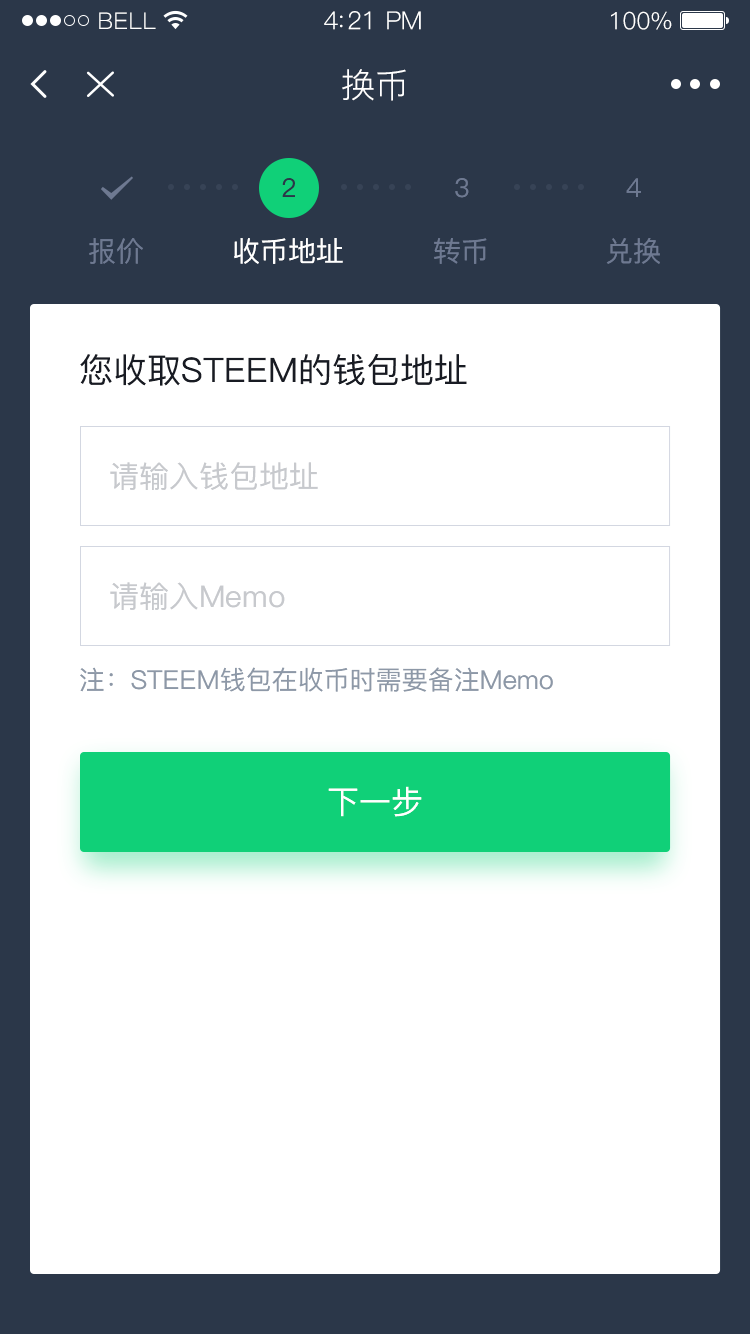
<style>
.page{position:relative;width:750px;height:1334px;background:#ffffff}
.page>*{position:absolute;margin:0}
.t1{font:23px "PingFang-SC-Regular";letter-spacing:0.02em;color:#ffffff}
.t2{font:25px "PingFang-SC-Regular";letter-spacing:-0.02em;color:#ffffff}
.t3{font:24px "PingFang-SC-Regular";letter-spacing:-0.02em;color:#ffffff}
.t4{font:34px "PingFang-SC-Regular";color:#ffffff}
.t5{font:26px "PingFang-SC-Medium";color:#2b3749}
.t6{font:26px "PingFang-SC-Medium";color:#6e7991}
.t7{font:28px "PingFang-SC-Medium";color:#6e7991}
.t8{font:28px "PingFang-SC-Medium";color:#ffffff}
.t9{font:34px "PingFang-SC-Medium";color:#181b23}
.t10{font:30px "PingFang-SC-Medium";color:#c7c9cd}
.t11{font:26px "PingFang-SC-Medium";color:#8d98a7}
.t12{font:32px "PingFang-SC-Medium";color:#ffffff}
</style>
<div class="page">
<p class="t1" style="left:99px;top:12px;width:57px;height:17px">BELL</p>
<p class="t2" style="left:324px;top:11px;width:97px;height:19px">4:21 PM</p>
<p class="t3" style="left:611px;top:11px;width:61px;height:19px">100%</p>
<p class="t4" style="left:342px;top:69px;width:64px;height:32px">换币</p>
<p class="t5" style="left:282px;top:178px;width:13px;height:19px">2</p>
<p class="t6" style="left:455px;top:178px;width:14px;height:20px">3</p>
<p class="t6" style="left:626px;top:178px;width:15px;height:19px">4</p>
<p class="t7" style="left:89px;top:238px;width:54px;height:26px">报价</p>
<p class="t8" style="left:234px;top:238px;width:109px;height:26px">收币地址</p>
<p class="t7" style="left:434px;top:238px;width:53px;height:26px">转币</p>
<p class="t7" style="left:606px;top:238px;width:54px;height:26px">兑换</p>
<p class="t9" style="left:80px;top:354px;width:387px;height:32px">您收取STEEM的钱包地址</p>
<p class="t10" style="left:110px;top:462px;width:208px;height:28px">请输入钱包地址</p>
<p class="t10" style="left:110px;top:582px;width:175px;height:28px">请输入Memo</p>
<p class="t11" style="left:80px;top:667px;width:473px;height:25px">注：STEEM钱包在收币时需要备注Memo</p>
<p class="t12" style="left:328px;top:786px;width:94px;height:31px">下一步</p>
</div>
